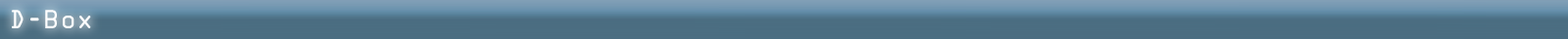
<style>
.page{position:relative;width:1568px;height:39px;background:#4b6d81}
.page>*{position:absolute;margin:0}
.t1{font:23.5px "OCRAStd";color:#ffffff}
</style>
<div class="page">
<p class="t1" style="left:12px;top:10px;width:79px;height:18px">D-Box</p>
</div>
